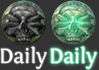
<style>
.page{position:relative;width:99px;height:70px;background:#333333}
.page>*{position:absolute;margin:0}
.t1{font:21.5px "Fontin-Regular";color:#ffffff}
</style>
<div class="page">
<p class="t1" style="left:0px;top:46px;width:47px;height:23px">Daily</p>
<p class="t1" style="left:50px;top:46px;width:47px;height:23px">Daily</p>
</div>
